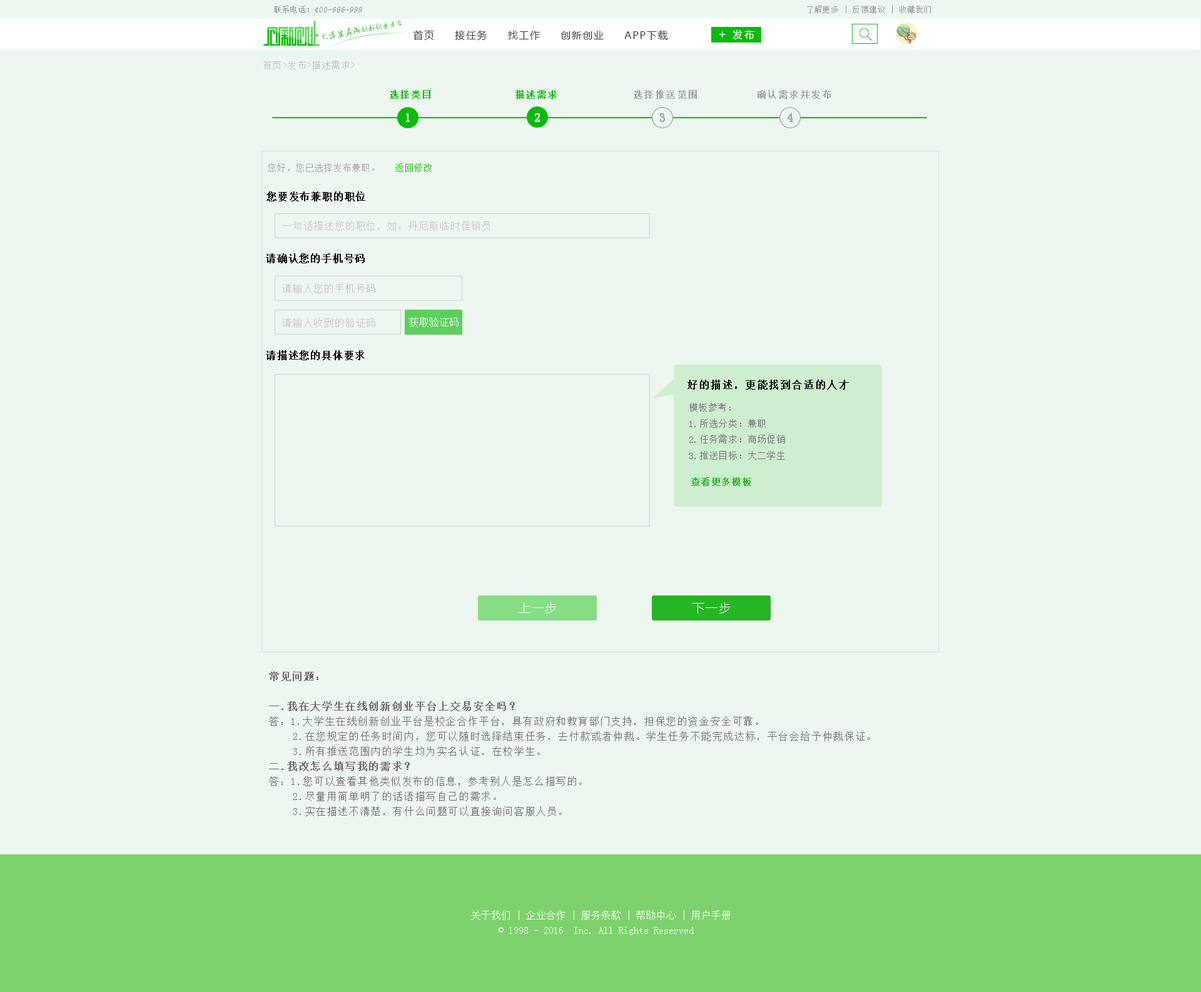
<style>
.page{position:relative;width:1201px;height:992px;background:#eef6f0}
.page>*{position:absolute;margin:0}
.t1{font:8.3px "SimSun";color:#959595;font-style:italic}
.t2{font:8.3px "SimSun";color:#959595}
.t3{font:7.5px "SimSun";letter-spacing:0.1em;color:#959494}
.t4{font:7.7px "AnJingCheng-Xing-2.0";letter-spacing:-0.01em;color:#09ba08}
.t5{font:8.7px "AnJingCheng-Xing-2.0";letter-spacing:-0.01em;color:#09ba08}
.t6{font:10px "MicrosoftYaHei";letter-spacing:0.2em;color:#ffffff}
.t7{font:10px "MicrosoftYaHei";letter-spacing:0.1em;color:#3e3e3e}
.t8{font:11.7px "MicrosoftYaHei";letter-spacing:0.2em;color:#ffffff}
.t9{font:8.8px "SimSun";letter-spacing:0.1em;color:#bebebe}
.t10{font:9.2px "SimSun";letter-spacing:0.1em;color:#09ba08;font-weight:bold}
.t11{font:9.1px "SimSun";letter-spacing:0.1em;color:#a2a2a2;font-weight:bold}
.t12{font:11.6px "SimSun";letter-spacing:0.1em;color:#ffffff;font-weight:bold}
.t13{font:11.6px "SimSun";letter-spacing:0.1em;color:#a2a2a2;font-weight:bold}
.t14{font:11.7px "SimSun";letter-spacing:0.1em;color:#a2a2a2;font-weight:bold}
.t15{font:9.2px "SimSun";color:#a3a0a0}
.t16{font:9.2px "SimSun";color:#09ba08}
.t17{font:10px "SimSun";letter-spacing:0.05em;color:#000000;font-weight:bold}
.t18{font:10px "SimSun";letter-spacing:0.05em;color:#c7c2c2}
.t19{font:10px "SimSun";color:#ffffff}
.t20{font:10px "SimSun";letter-spacing:0.1em;color:#010101;font-weight:bold}
.t21{font:9.2px "SimSun";letter-spacing:0.025em;color:#6f6f6f}
.t22{font:9.2px "SimSun";letter-spacing:0.025em;color:#26b525;font-weight:bold}
.t23{font:11.7px "MicrosoftYaHei";letter-spacing:0.1em;color:#ffffff}
.t24{font:10px/15px "SimSun";letter-spacing:0.1em;color:#696969}
.t25{font:10px/15px "SimSun";letter-spacing:0.1em;color:#696969;font-weight:bold}
.t26{font:10px/15px "SimSun";color:#ffffff}
</style>
<div class="page">
<p class="t1" style="left:274px;top:6px;width:88px;height:7px"><span class="t2">联系电话：</span>400-666-999</p>
<p class="t3" style="left:807px;top:6px;width:124px;height:7px">了解更多 | 反馈建议 | 收藏我们</p>
<p class="t4" style="left:322px;top:19px;width:80px;height:20px;rotate:-10deg"><span class="t5">大学生在线</span>创新创业平台</p>
<p class="t6" style="left:733px;top:29px;width:22px;height:10px">发布</p>
<p class="t7" style="left:413px;top:30px;width:255px;height:11px">首页     接任务     找工作     创新创业     APP下载</p>
<p class="t8" style="left:720px;top:31px;width:6px;height:7px">+</p>
<p class="t9" style="left:263px;top:61px;width:92px;height:8px">首页&gt;发布&gt;描述需求&gt;</p>
<p class="t10" style="left:390px;top:90px;width:41px;height:9px">选择类目</p>
<p class="t10" style="left:516px;top:90px;width:41px;height:9px">描述需求</p>
<p class="t11" style="left:634px;top:90px;width:63px;height:9px">选择推送范围</p>
<p class="t11" style="left:757px;top:90px;width:75px;height:9px">确认需求并发布</p>
<p class="t12" style="left:406px;top:113px;width:4px;height:9px">1</p>
<p class="t12" style="left:535px;top:113px;width:5px;height:9px">2</p>
<p class="t13" style="left:660px;top:113px;width:5px;height:9px">3</p>
<p class="t14" style="left:788px;top:113px;width:5px;height:9px">4</p>
<p class="t15" style="left:268px;top:163px;width:164px;height:9px">您好，您已选择发布兼职。   <span class="t16">返回修改</span></p>
<p class="t17" style="left:267px;top:191px;width:98px;height:10px">您要发布兼职的职位</p>
<p class="t18" style="left:282px;top:221px;width:209px;height:10px">一句话描述您的职位，如：丹尼斯临时促销员</p>
<p class="t17" style="left:266px;top:253px;width:99px;height:10px">请确认您的手机号码</p>
<p class="t18" style="left:282px;top:283px;width:93px;height:10px">请输入您的手机号码</p>
<p class="t18" style="left:282px;top:318px;width:93px;height:10px">请输入收到的验证码</p>
<p class="t19" style="left:409px;top:317px;width:50px;height:10px">获取验证码</p>
<p class="t17" style="left:266px;top:350px;width:99px;height:10px">请描述您的具体要求</p>
<p class="t20" style="left:688px;top:380px;width:161px;height:10px">好的描述，更能找到合适的人才</p>
<p class="t21" style="left:690px;top:403px;width:95px;height:57px">模板参考：<br>1.所选分类：兼职<br>2.任务需求：商场促销<br>3.推送目标：大二学生</p>
<p class="t22" style="left:691px;top:477px;width:61px;height:9px">查看更多模板</p>
<p class="t23" style="left:519px;top:603px;width:37px;height:11px">上一步</p>
<p class="t23" style="left:693px;top:603px;width:37px;height:11px">下一步</p>
<p class="t24" style="left:269px;top:671px;width:601px;height:146px"><span class="t25">常见问题：<br><br>一.我在大学生在线创新创业平台上交易安全吗？<br></span>答：1.大学生在线创新创业平台是校企合作平台，具有政府和教育部门支持，担保您的资金安全可靠。<br>    2.在您规定的任务时间内，您可以随时选择结束任务，去付款或者仲裁。学生任务不能完成达标，平台会给予仲裁保证。<br>    3.所有推送范围内的学生均为实名认证，在校学生。<br><span class="t25">二.我改怎么填写我的需求？<br></span>答：1.您可以查看其他类似发布的信息，参考别人是怎么描写的。<br>    2.尽量用简单明了的话语描写自己的需求。<br>    3.实在描述不清楚，有什么问题可以直接询问客服人员。</p>
<p class="t26" style="left:471px;top:910px;width:260px;height:26px;text-align:center">关于我们 | 企业合作 | 服务条款 | 帮助中心 | 用户手册<br>© 1998 - 2016  Inc. All Rights Reserved</p>
</div>
